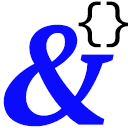
<style>
.page{position:relative;width:128px;height:128px;background:#ffffff}
.page>*{position:absolute;margin:0}
.t1{font:48px "Verdana";letter-spacing:-0.06em;color:#000000}
.t2{font:140px "PTSerif-BoldItalic";letter-spacing:-0.06em;color:#0b0bff}
</style>
<div class="page">
<p class="t1" style="left:78px;top:1px;width:51px;height:47px">{}</p>
<p class="t2" style="left:3px;top:24px;width:111px;height:103px">&amp;</p>
</div>
